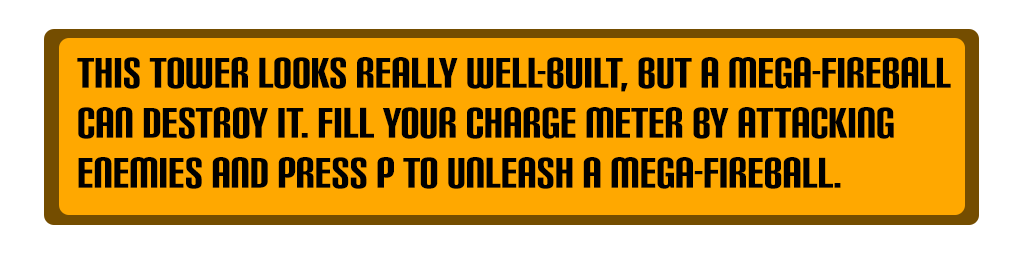
<style>
.page{position:relative;width:1024px;height:256px;background:#ffa800}
.page>*{position:absolute;margin:0}
.t1{font:41.7px "CarbonBl-Regular";color:#000000;scale:0.91 1}
</style>
<div class="page">
<p class="t1" style="left:77px;top:57px;width:874px;height:132px">This tower looks really well-built, but a mega-fireball can destroy it. Fill your charge meter by attacking enemies and press P to unleash a mega-fireball.</p>
</div>
